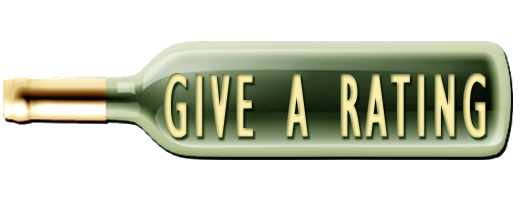
<style>
.page{position:relative;width:520px;height:200px;background:#ffffff}
.page>*{position:absolute;margin:0}
.t1{font:91.6px "GillSansMT-Condensed";letter-spacing:0.05em;font-variant:small-caps;font-weight:bold;scale:0.67 1}
</style>
<div class="page">
<p class="t1" style="left:164px;top:73px;width:322px;height:65px">GIVE A RATING</p>
</div>
